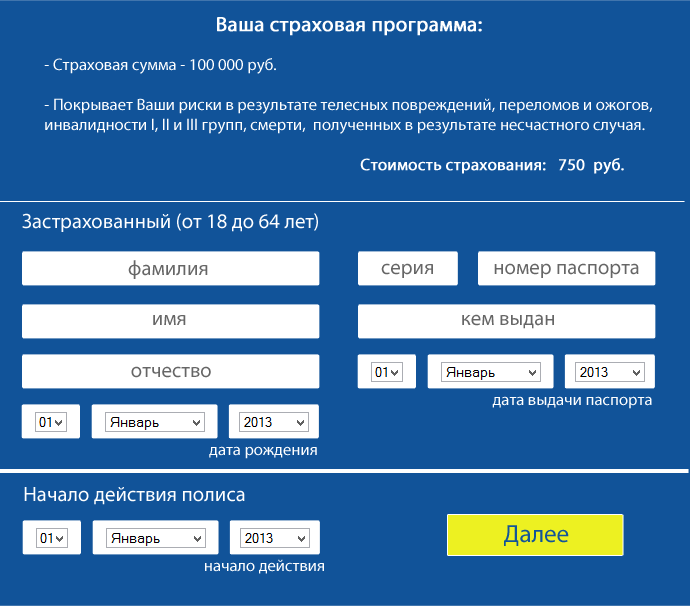
<style>
.page{position:relative;width:690px;height:606px;background:#115399}
.page>*{position:absolute;margin:0}
.t1{font:20.8px "MyriadPro-Regular";color:#ffffff;font-weight:bold}
.t2{font:16.7px "MyriadPro-Regular";color:#ffffff}
.t3{font:16.7px "MyriadPro-Regular";color:#ffffff;font-weight:bold}
.t4{font:20.8px "MyriadPro-Regular";color:#ffffff}
.t5{font:20.8px "MyriadPro-Regular";color:#666666}
.t6{font:25px "MyriadPro-Regular";color:#135599}
</style>
<div class="page">
<p class="t1" style="left:217px;top:17px;width:265px;height:19px">Ваша страховая программа:</p>
<p class="t2" style="left:44px;top:58px;width:609px;height:76px;text-align:center"><span class="t3"><br></span>- Страховая сумма - 100 000 руб.<br><br>- Покрывает Ваши риски в результате телесных повреждений, переломов и ожогов,  инвалидности I, II и III групп, смерти,  полученных в результате несчастного случая.</p>
<p class="t3" style="left:360px;top:158px;width:264px;height:16px">Стоимость страхования:   750  руб.</p>
<p class="t4" style="left:22px;top:213px;width:296px;height:19px">Застрахованный (от 18 до 64 лет)</p>
<p class="t5" style="left:128px;top:260px;width:80px;height:19px">фамилия</p>
<p class="t5" style="left:381px;top:263px;width:52px;height:15px">серия</p>
<p class="t5" style="left:494px;top:263px;width:145px;height:15px">номер паспорта</p>
<p class="t5" style="left:153px;top:315px;width:33px;height:10px">имя</p>
<p class="t5" style="left:462px;top:314px;width:92px;height:15px">кем выдан</p>
<p class="t5" style="left:131px;top:366px;width:80px;height:12px">отчество</p>
<p class="t2" style="left:492px;top:396px;width:160px;height:13px">дата выдачи паспорта</p>
<p class="t2" style="left:209px;top:446px;width:108px;height:13px">дата рождения</p>
<p class="t4" style="left:24px;top:487px;width:221px;height:18px">Начало действия полиса</p>
<p class="t6" style="left:504px;top:525px;width:65px;height:21px">Далее</p>
<p class="t2" style="left:205px;top:559px;width:119px;height:15px">начало действия</p>
</div>
